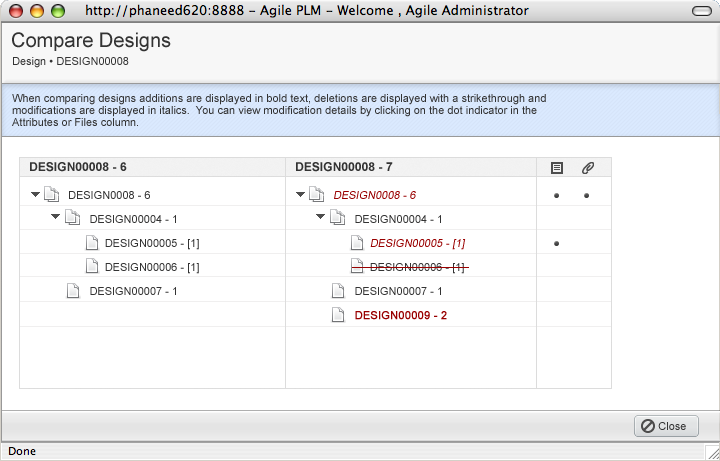
<style>
.page{position:relative;width:720px;height:461px;background:#ffffff}
.page>*{position:absolute;margin:0}
.t1{font:20px "ArialMT";color:#333333}
.t2{font:11px "ArialMT";color:#333333}
.t3{font:11px/12px "ArialMT";color:#333333}
.t4{font:12px "Arial-BoldMT";letter-spacing:0.005em;color:#333333}
.t5{font:11px/24px "ArialMT";color:#333333}
.t6{font:11px/24px "Arial-BoldMT";color:#333333}
.t7{font:11px/24px "ArialMT";color:#990000;font-style:italic}
.t8{font:11px/24px "ArialMT";color:#990000;font-weight:bold}
</style>
<div class="page">
<p class="t1" style="left:12px;top:32px;width:159px;height:20px">Compare Designs</p>
<p class="t2" style="left:13px;top:57px;width:116px;height:11px">Design • DESIGN00008</p>
<p class="t3" style="left:12px;top:94px;width:534px;height:32px">When comparing designs additions are displayed in bold text, deletions are displayed with a strikethrough and<br>modifications are displayed in italics.  You can view modification details by clicking on the dot indicator in the<br>Attributes or Files column.</p>
<p class="t4" style="left:30px;top:162px;width:97px;height:10px">DESIGN00008 - 6</p>
<p class="t4" style="left:296px;top:162px;width:97px;height:10px">DESIGN00008 - 7</p>
<p class="t5" style="left:69px;top:191px;width:130px;height:104px"><span class="t6"><br></span>DESIGN0008 - 6<br>       DESIGN00004 - 1<br>            DESIGN00005 - [1]<br>            DESIGN00006 - [1]<br>       DESIGN00007 - 1</p>
<p class="t5" style="left:334px;top:191px;width:132px;height:129px"><span class="t6"><br></span><span class="t7">DESIGN0008 - 6<br></span>       DESIGN00004 - 1<br>            <span class="t7">DESIGN00005 - [1]<br></span>            DESIGN00006 - [1]<br>       DESIGN00007 - 1<br>       <span class="t8">DESIGN00009 - 2</span></p>
<p class="t2" style="left:658px;top:422px;width:28px;height:8px">Close</p>
</div>
